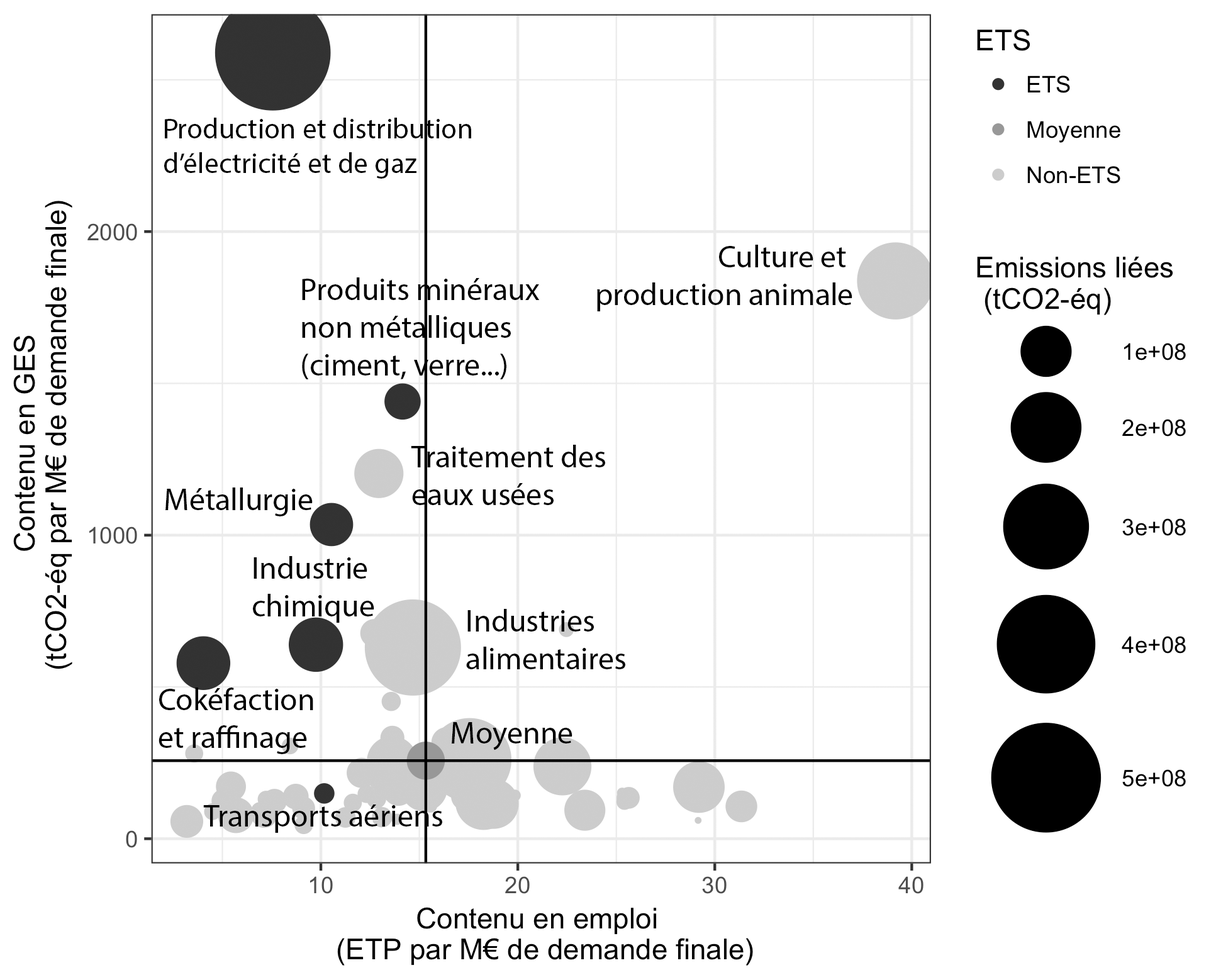
<style>
.page{position:relative;width:1216px;height:980px;background:#ffffff}
.page>*{position:absolute;margin:0}
.t1{font:28.8px "MyriadPro-Regular";color:#000000}
.t2{font:31.5px "MyriadPro-Regular";color:#000000}
</style>
<div class="page">
<p class="t1" style="left:164px;top:118px;width:307px;height:61px">Production et distribution<br>d’électricité et de gaz</p>
<p class="t2" style="left:597px;top:245px;width:256px;height:66px;text-align:right">Culture et <br>production animale</p>
<p class="t2" style="left:302px;top:277px;width:238px;height:102px">Produits minéraux<br>non métalliques<br>(ciment, verre...)</p>
<p class="t2" style="left:411px;top:445px;width:194px;height:60px">Traitement des<br>eaux usées</p>
<p class="t2" style="left:165px;top:488px;width:148px;height:29px">Métallurgie</p>
<p class="t2" style="left:253px;top:556px;width:121px;height:67px">Industrie<br>chimique</p>
<p class="t2" style="left:466px;top:609px;width:159px;height:61px">Industries<br>alimentaires</p>
<p class="t2" style="left:159px;top:688px;width:154px;height:66px">Cokéfaction<br>et raffinage</p>
<p class="t2" style="left:452px;top:722px;width:121px;height:29px">Moyenne</p>
<p class="t2" style="left:203px;top:805px;width:239px;height:28px">Transports aériens</p>
</div>
